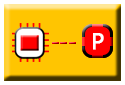
<style>
.page{position:relative;width:125px;height:85px;background:#ffc501}
.page>*{position:absolute;margin:0}
.t1{font:21px "Verdana";color:#ffffff;font-weight:bold}
</style>
<div class="page">
<p class="t1" style="left:93px;top:33px;width:11px;height:17px">P</p>
</div>
